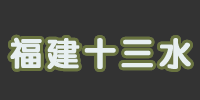
<style>
.page{position:relative;width:200px;height:100px;background:#333333}
.page>*{position:absolute;margin:0}
.t1{font:33.1px "FZY4JW--GB1-0";letter-spacing:0.1em;color:#e7eff0;font-weight:bold}
</style>
<div class="page">
<p class="t1" style="left:10px;top:37px;width:181px;height:32px">福建十三水</p>
</div>
